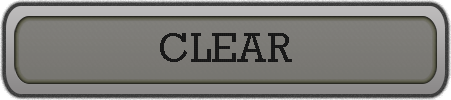
<style>
.page{position:relative;width:451px;height:100px}
.page>*{position:absolute;margin:0}
.t1{font:41.7px "Rockwell";color:#1a1a1a}
</style>
<div class="page">
<p class="t1" style="left:160px;top:33px;width:132px;height:29px">CLEAR</p>
</div>
